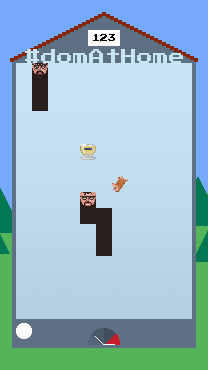
<style>
.page{position:relative;width:208px;height:370px}
.page>*{position:absolute;margin:0}
.t1{font:8px "PressStart2P-Regular";color:#000000}
.t2{font:16px "PressStart2P-Regular";color:#c7e4f4}
</style>
<div class="page">
<p class="t1" style="left:92px;top:33px;width:24px;height:9px">123</p>
<p class="t2" style="left:25px;top:49px;width:158px;height:14px">#domAtHome</p>
</div>
